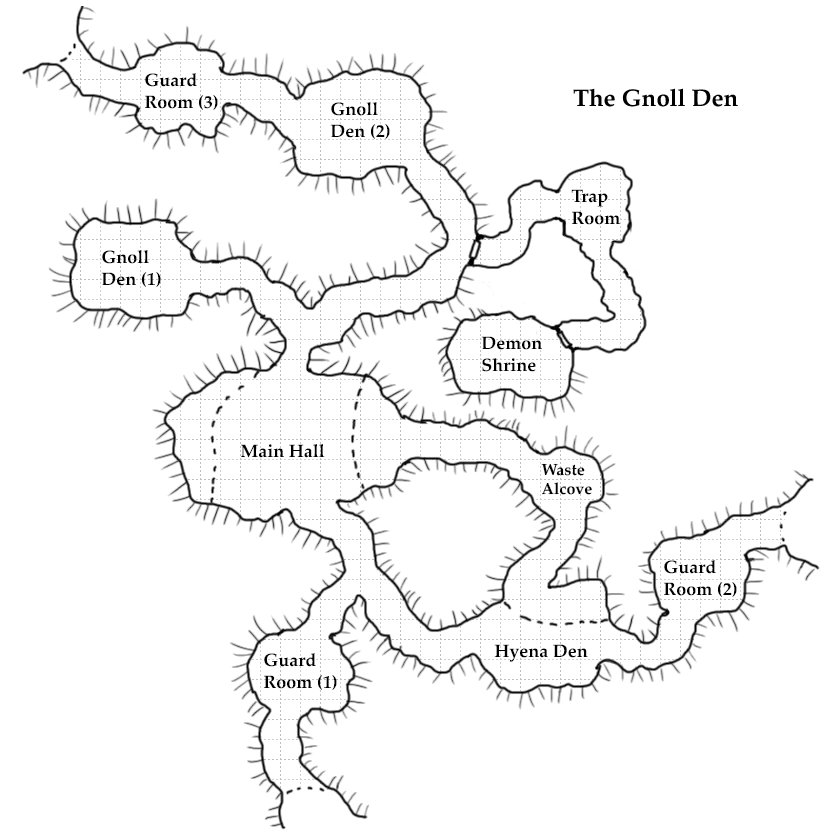
<style>
.page{position:relative;width:840px;height:840px;background:#ffffff}
.page>*{position:absolute;margin:0}
.t1{font:18px "Palatino-Bold";color:#000000}
.t2{font:24px "Palatino-Bold";color:#000000}
.t3{font:16px "Palatino-Bold";color:#000000}
</style>
<div class="page">
<p class="t1" style="left:145px;top:73px;width:73px;height:37px">Guard<br>Room (3)</p>
<p class="t2" style="left:573px;top:88px;width:165px;height:19px">The Gnoll Den</p>
<p class="t1" style="left:330px;top:102px;width:60px;height:37px">Gnoll <br>Den (2)</p>
<p class="t1" style="left:571px;top:189px;width:49px;height:36px">Trap<br>Room</p>
<p class="t1" style="left:101px;top:250px;width:60px;height:37px">Gnoll <br>Den (1)</p>
<p class="t1" style="left:481px;top:336px;width:61px;height:36px">Demon<br>Shrine</p>
<p class="t1" style="left:241px;top:444px;width:84px;height:14px">Main Hall</p>
<p class="t3" style="left:541px;top:463px;width:51px;height:32px">Waste<br>Alcove</p>
<p class="t1" style="left:664px;top:560px;width:73px;height:37px">Guard<br>Room (2)</p>
<p class="t1" style="left:264px;top:653px;width:73px;height:37px">Guard<br>Room (1)</p>
<p class="t1" style="left:494px;top:644px;width:94px;height:18px">Hyena Den</p>
</div>
